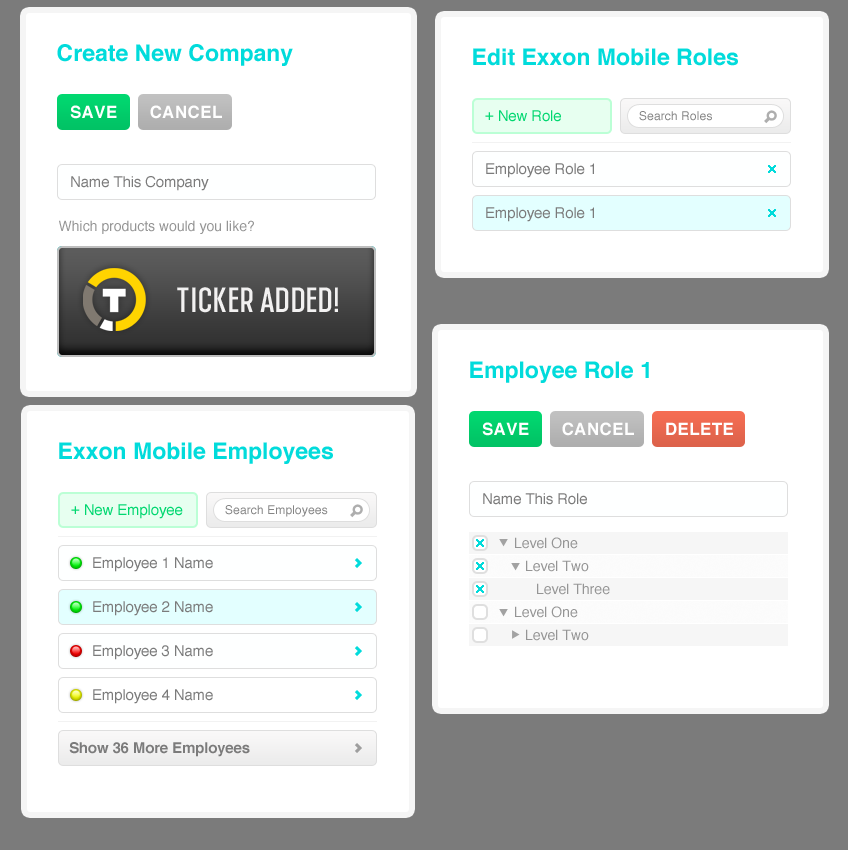
<style>
.page{position:relative;width:848px;height:850px;background:#ffffff}
.page>*{position:absolute;margin:0}
.t1{font:23px "Helvetica-Bold";color:#01dbdb}
.t2{font:17px "Helvetica-Bold";letter-spacing:0.02em;color:#ffffff}
.t3{font:15px "Helvetica";letter-spacing:-0.01em;color:#01d770}
.t4{font:12px "Helvetica";letter-spacing:0.01em;color:#858585}
.t5{font:15px "Helvetica";letter-spacing:-0.01em;color:#7b7b7b}
.t6{font:14px "Helvetica";color:#959595}
.t7{font:35px "ChromadicaBoldCondensed";letter-spacing:0.02em;color:#f2f1f1}
.t8{font:14px/23px "Helvetica";color:#959595}
.t9{font:15px "Helvetica-Bold";letter-spacing:-0.01em;color:#7b7b7b}
</style>
<div class="page">
<p class="t1" style="left:57px;top:44px;width:236px;height:22px">Create New Company</p>
<p class="t1" style="left:473px;top:48px;width:265px;height:18px">Edit Exxon Mobile Roles</p>
<p class="t2" style="left:70px;top:105px;width:152px;height:14px">SAVE      CANCEL</p>
<p class="t3" style="left:485px;top:110px;width:76px;height:12px">+ New Role</p>
<p class="t4" style="left:639px;top:111px;width:73px;height:10px">Search Roles</p>
<p class="t5" style="left:486px;top:163px;width:108px;height:15px">Employee Role 1</p>
<p class="t5" style="left:71px;top:176px;width:138px;height:15px">Name This Company</p>
<p class="t5" style="left:486px;top:207px;width:108px;height:15px">Employee Role 1</p>
<p class="t6" style="left:59px;top:220px;width:195px;height:14px">Which products would you like?</p>
<p class="t7" style="left:177px;top:287px;width:161px;height:26px">TICKER ADDED!</p>
<p class="t1" style="left:470px;top:361px;width:179px;height:22px">Employee Role 1</p>
<p class="t2" style="left:482px;top:422px;width:251px;height:14px">SAVE      CANCEL      DELETE</p>
<p class="t1" style="left:59px;top:442px;width:274px;height:22px">Exxon Mobile Employees</p>
<p class="t5" style="left:483px;top:493px;width:104px;height:12px">Name This Role</p>
<p class="t3" style="left:71px;top:504px;width:112px;height:15px">+ New Employee</p>
<p class="t4" style="left:225px;top:505px;width:103px;height:12px">Search Employees</p>
<p class="t8" style="left:515px;top:537px;width:95px;height:104px">Level One<br>Level Two<br>Level Three<br>Level One<br>Level Two</p>
<p class="t5" style="left:93px;top:557px;width:120px;height:15px">Employee 1 Name</p>
<p class="t5" style="left:93px;top:601px;width:120px;height:15px">Employee 2 Name</p>
<p class="t5" style="left:93px;top:645px;width:120px;height:15px">Employee 3 Name</p>
<p class="t5" style="left:93px;top:689px;width:120px;height:15px">Employee 4 Name</p>
<p class="t9" style="left:69px;top:742px;width:181px;height:15px">Show 36 More Employees</p>
</div>
